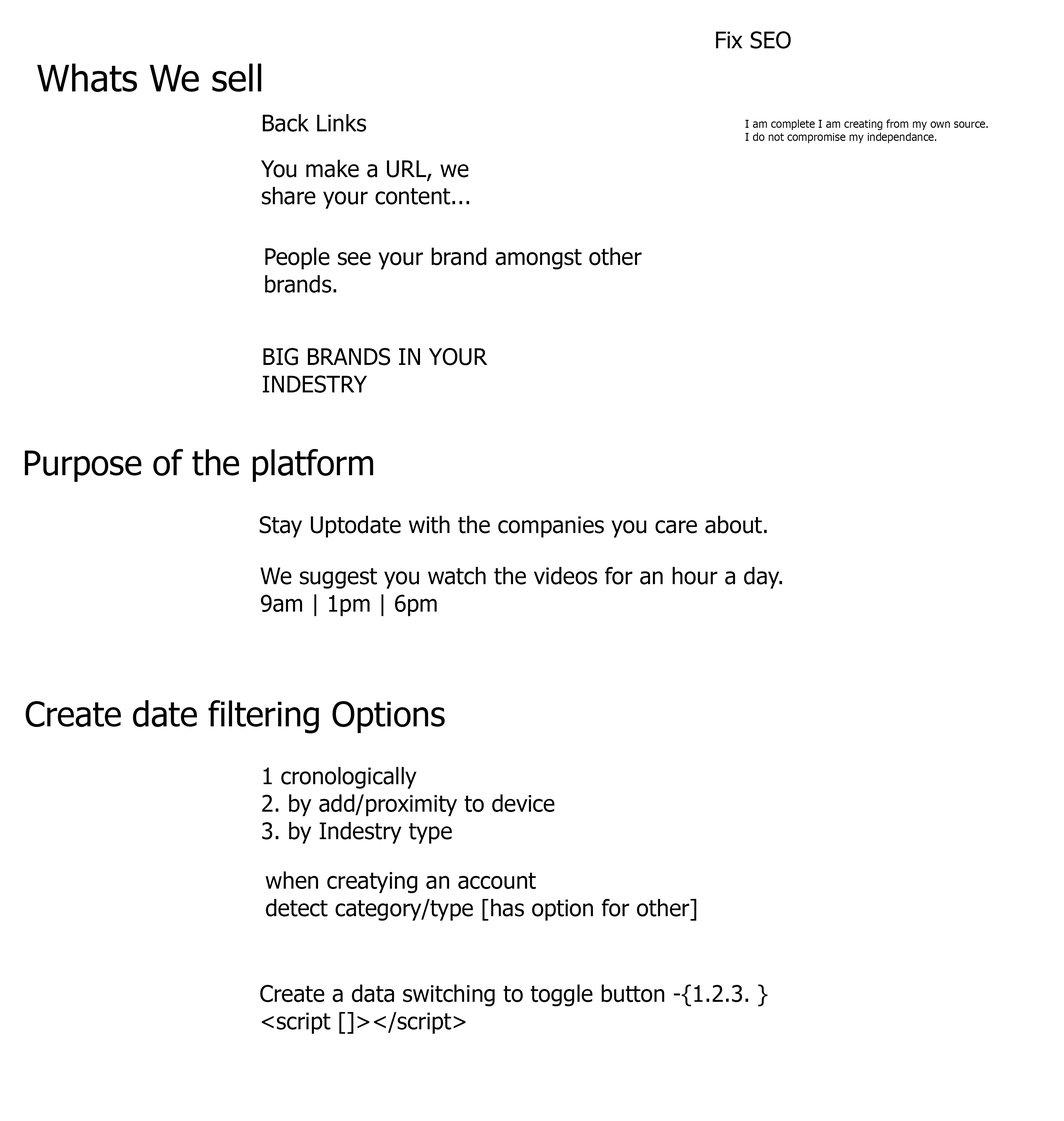
<style>
.page{position:relative;width:1064px;height:1121px;background:#ffffff}
.page>*{position:absolute;margin:0}
.t1{font:22.8px "Tahoma";color:#000000}
.t2{font:36.5px "Tahoma";color:#000000}
.t3{font:2.6px "Tahoma";color:#000000}
.t4{font:33.8px "Tahoma";color:#000000}
</style>
<div class="page">
<p class="t1" style="left:716px;top:31px;width:75px;height:18px">Fix SEO</p>
<p class="t2" style="left:37px;top:64px;width:224px;height:28px">Whats We sell</p>
<p class="t1" style="left:263px;top:114px;width:103px;height:18px">Back Links</p>
<p class="t3" style="left:745px;top:120px;width:243px;height:23px">I am complete I am creating from my own source. <br>I do not compromise my independance.</p>
<p class="t1" style="left:261px;top:160px;width:208px;height:49px">You make a URL, we <br>share your content...</p>
<p class="t1" style="left:265px;top:248px;width:377px;height:45px">People see your brand amongst other <br>brands.</p>
<p class="t1" style="left:263px;top:348px;width:225px;height:45px">BIG BRANDS IN YOUR<br>INDESTRY</p>
<p class="t4" style="left:25px;top:449px;width:348px;height:33px">Purpose of the platform</p>
<p class="t1" style="left:259px;top:516px;width:508px;height:21px">Stay Uptodate with the companies you care about.</p>
<p class="t1" style="left:260px;top:567px;width:522px;height:49px">We suggest you watch the videos for an hour a day.<br>9am | 1pm | 6pm</p>
<p class="t4" style="left:26px;top:700px;width:419px;height:33px">Create date filtering Options</p>
<p class="t1" style="left:262px;top:767px;width:292px;height:77px">1 cronologically<br>2. by add/proximity to device<br>3. by Indestry type</p>
<p class="t1" style="left:266px;top:871px;width:430px;height:50px">when creatying an account<br>detect category/type [has option for other]</p>
<p class="t1" style="left:260px;top:985px;width:507px;height:49px">Create a data switching to toggle button -{1.2.3. }<br>&lt;script []&gt;&lt;/script&gt;</p>
</div>
